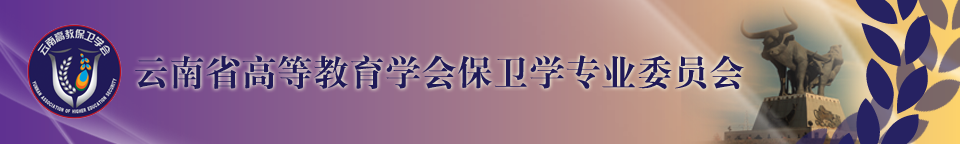
<style>
.page{position:relative;width:960px;height:144px}
.page>*{position:absolute;margin:0}
.t1{font:36px "ç»å¸ç²å®ç®-regular";color:#201a58}
</style>
<div class="page">
<p class="t1" style="left:135px;top:55px;width:609px;height:34px">云南省高等教育学会保卫学专业委员会</p>
</div>
